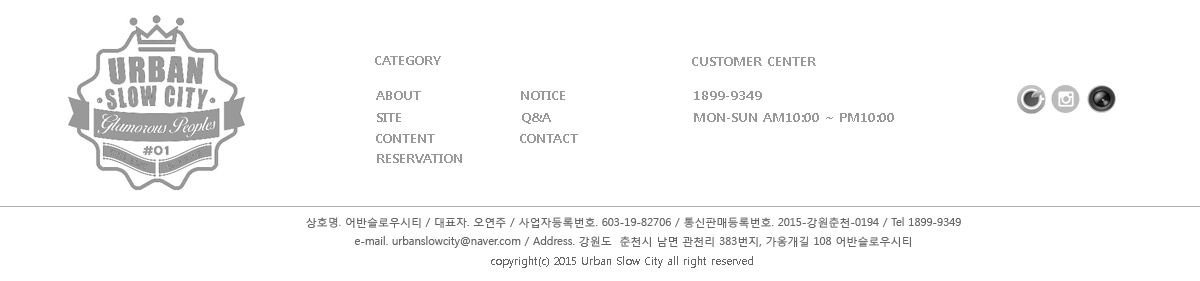
<style>
.page{position:relative;width:1200px;height:281px;background:#ffffff}
.page>*{position:absolute;margin:0}
.t1{font:13px "MalgunGothicBold";color:#999999}
.t2{font:11px "MalgunGothicRegular";color:#666666}
</style>
<div class="page">
<p class="t1" style="left:375px;top:56px;width:66px;height:9px">CATEGORY</p>
<p class="t1" style="left:692px;top:57px;width:124px;height:9px">CUSTOMER CENTER</p>
<p class="t1" style="left:376px;top:91px;width:45px;height:9px">ABOUT</p>
<p class="t1" style="left:521px;top:91px;width:44px;height:9px">NOTICE</p>
<p class="t1" style="left:694px;top:91px;width:68px;height:9px">1899-9349</p>
<p class="t1" style="left:377px;top:113px;width:24px;height:9px">SITE</p>
<p class="t1" style="left:522px;top:113px;width:29px;height:11px">Q&amp;A</p>
<p class="t1" style="left:694px;top:113px;width:200px;height:9px">MON-SUN AM10:00 ~ PM10:00</p>
<p class="t1" style="left:376px;top:134px;width:59px;height:9px">CONTENT</p>
<p class="t1" style="left:520px;top:134px;width:58px;height:9px">CONTACT</p>
<p class="t1" style="left:377px;top:154px;width:85px;height:9px">RESERVATION</p>
<p class="t2" style="left:306px;top:217px;width:655px;height:31px;text-align:center">상호명. 어반슬로우시티 / 대표자. 오연주 / 사업자등록번호. 603-19-82706 / 통신판매등록번호. 2015-강원춘천-0194 / Tel 1899-9349<br>e-mail. urbanslowcity@naver.com / Address. 강원도  춘천시 남면 관천리 383번지, 가옹개길 108 어반슬로우시티</p>
<p class="t2" style="left:491px;top:256px;width:262px;height:12px">copyright(c) 2015 Urban Slow City all right reserved</p>
</div>
